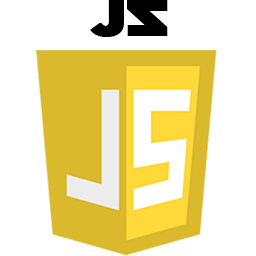
<style>
.page{position:relative;width:256px;height:256px;background:#ffffff}
.page>*{position:absolute;margin:0}
.t1{font:50.1px "GothamUltra";color:#000000;font-weight:bold;scale:1.18 1}
</style>
<div class="page">
<p class="t1" style="left:90px;top:0px;width:34px;height:37px">J</p>
<p class="t1" style="left:127px;top:0px;width:41px;height:36px">Z</p>
</div>
